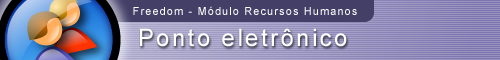
<style>
.page{position:relative;width:500px;height:60px}
.page>*{position:absolute;margin:0}
.t1{font:11px "ArialMT";letter-spacing:0.1em;color:#ffffff}
.t2{font:24px "ArialMT";letter-spacing:0.1em;color:#ffffff}
</style>
<div class="page">
<p class="t1" style="left:133px;top:6px;width:224px;height:9px">Freedom - Módulo Recursos Humanos</p>
<p class="t2" style="left:140px;top:28px;width:207px;height:19px">Ponto eletrônico</p>
</div>
